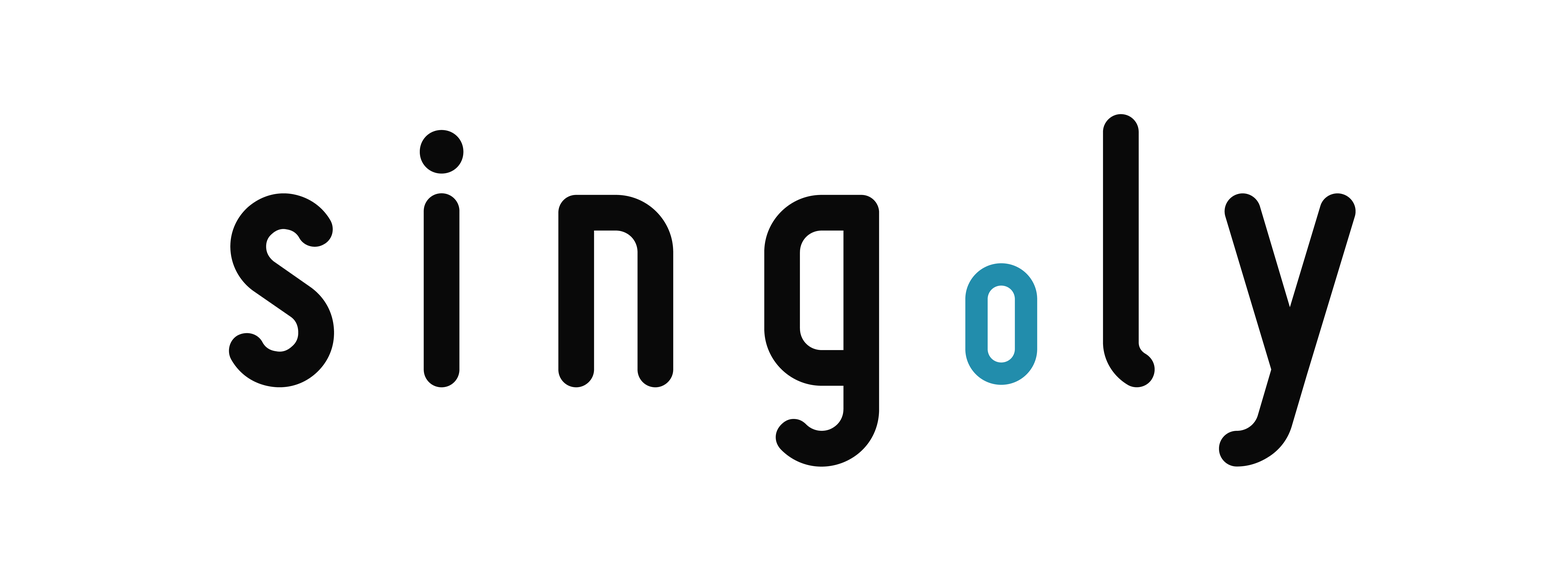
<style>
.page{position:relative;width:1568px;height:570px;background:#ffffff}
.page>*{position:absolute;margin:0}
.t1{font:396px "Miso-Bold";letter-spacing:0.14em;color:#090909}
.t2{font:247.5px "Miso-Bold";letter-spacing:0.14em;color:#228dac}
</style>
<div class="page">
<p class="t1" style="left:229px;top:114px;width:1127px;height:353px">sing<span class="t2">o</span>ly</p>
</div>
